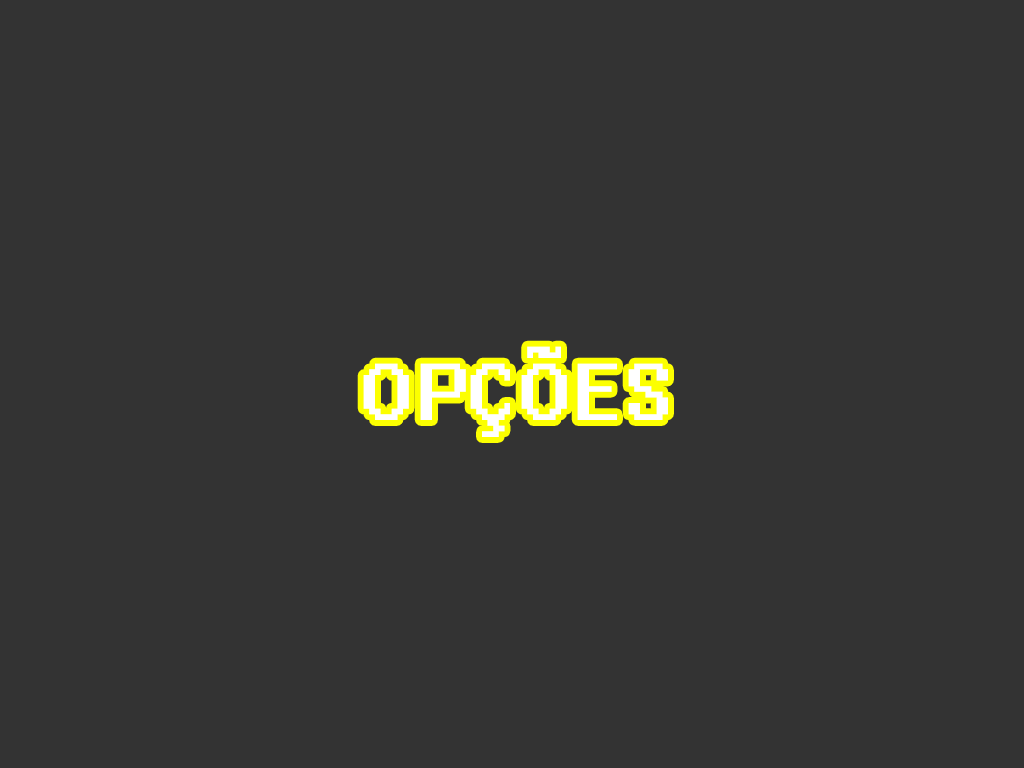
<style>
.page{position:relative;width:1024px;height:768px;background:#333333}
.page>*{position:absolute;margin:0}
.t1{font:72px "System";color:#ffffff}
</style>
<div class="page">
<p class="t1" style="left:363px;top:346px;width:305px;height:91px">OPÇÕES</p>
</div>
